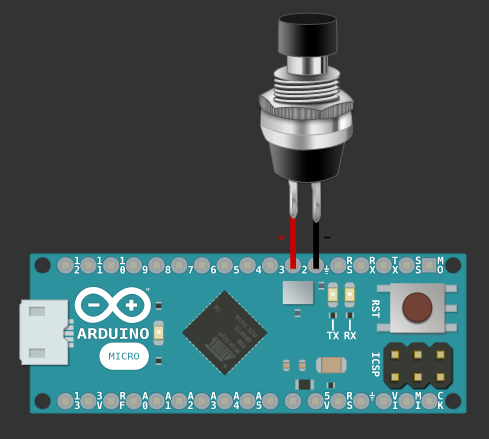
<style>
.page{position:relative;width:489px;height:439px;background:#333333}
.page>*{position:absolute;margin:0}
.t1{font:12px "Menlo-Bold";color:#cc0000}
.t2{font:12px "Menlo-Bold";color:#000000}
.t3{font:10.3px "Menlo-Bold";color:#ffffff}
.t4{font:2.9px "Menlo-Bold"}
.t5{font:5.9px "Menlo-Regular";color:#555852}
.t6{font:10.4px "Menlo-Bold";color:#ffffff}
.t7{font:14.6px "Menlo-Bold";color:#ffffff;scale:1.18 1}
.t8{font:9.2px "Menlo-Regular";color:#2c8e98;scale:1.12 1}
</style>
<div class="page">
<p class="t1" style="left:278px;top:234px;width:7px;height:7px">+</p>
<p class="t2" style="left:324px;top:236px;width:7px;height:3px">-</p>
<p class="t3" style="left:74px;top:256px;width:6px;height:9px">1</p>
<p class="t3" style="left:97px;top:256px;width:6px;height:9px">1</p>
<p class="t3" style="left:120px;top:256px;width:5px;height:9px">1</p>
<p class="t3" style="left:347px;top:256px;width:6px;height:9px">R</p>
<p class="t3" style="left:369px;top:256px;width:7px;height:9px">R</p>
<p class="t3" style="left:392px;top:256px;width:6px;height:9px">T</p>
<p class="t3" style="left:415px;top:256px;width:6px;height:9px">S</p>
<p class="t3" style="left:437px;top:256px;width:7px;height:9px">M</p>
<p class="t3" style="left:74px;top:265px;width:6px;height:9px">2</p>
<p class="t3" style="left:97px;top:266px;width:6px;height:8px">1</p>
<p class="t3" style="left:120px;top:266px;width:5px;height:8px">0</p>
<p class="t3" style="left:142px;top:265px;width:6px;height:9px">9</p>
<p class="t3" style="left:165px;top:265px;width:6px;height:9px">8</p>
<p class="t3" style="left:188px;top:266px;width:5px;height:8px">7</p>
<p class="t3" style="left:211px;top:265px;width:5px;height:9px">6</p>
<p class="t3" style="left:234px;top:266px;width:5px;height:8px">5</p>
<p class="t3" style="left:256px;top:266px;width:6px;height:8px">4</p>
<p class="t3" style="left:279px;top:265px;width:6px;height:9px">3</p>
<p class="t3" style="left:302px;top:265px;width:5px;height:9px">2</p>
<p class="t3" style="left:347px;top:265px;width:6px;height:9px">S</p>
<p class="t3" style="left:369px;top:266px;width:7px;height:8px">X</p>
<p class="t3" style="left:392px;top:266px;width:7px;height:8px">X</p>
<p class="t3" style="left:415px;top:265px;width:6px;height:9px">S</p>
<p class="t3" style="left:437px;top:265px;width:6px;height:9px">O</p>
<p class="t4" style="left:145px;top:288px;width:5px;height:3px">TM</p>
<p class="t5" style="left:213px;top:304px;width:39px;height:39px;rotate:-135deg">ROBOTS      TM</p>
<p class="t6" style="left:372px;top:300px;width:8px;height:18px;rotate:90deg">RST</p>
<p class="t5" style="left:235px;top:314px;width:23px;height:24px;rotate:-135deg">BIG DATA</p>
<p class="t7" style="left:77px;top:328px;width:72px;height:11px">ARDUINO</p>
<p class="t5" style="left:218px;top:332px;width:23px;height:22px;rotate:-135deg">MEGA32U4</p>
<p class="t5" style="left:236px;top:339px;width:11px;height:10px;rotate:-135deg">RBD</p>
<p class="t3" style="left:327px;top:331px;width:12px;height:9px">TX</p>
<p class="t3" style="left:344px;top:331px;width:13px;height:9px">RX</p>
<p class="t8" style="left:109px;top:352px;width:30px;height:8px">MICRO</p>
<p class="t6" style="left:372px;top:352px;width:8px;height:25px;rotate:90deg">ICSP</p>
<p class="t3" style="left:74px;top:401px;width:6px;height:8px">3</p>
<p class="t3" style="left:74px;top:392px;width:6px;height:8px">1</p>
<p class="t3" style="left:96px;top:401px;width:7px;height:8px">V</p>
<p class="t3" style="left:97px;top:391px;width:5px;height:9px">3</p>
<p class="t3" style="left:120px;top:401px;width:5px;height:8px">F</p>
<p class="t3" style="left:120px;top:392px;width:6px;height:8px">R</p>
<p class="t3" style="left:142px;top:401px;width:6px;height:9px">0</p>
<p class="t3" style="left:142px;top:392px;width:7px;height:8px">A</p>
<p class="t3" style="left:165px;top:401px;width:6px;height:8px">1</p>
<p class="t3" style="left:165px;top:392px;width:7px;height:8px">A</p>
<p class="t3" style="left:187px;top:392px;width:7px;height:8px">A</p>
<p class="t3" style="left:188px;top:401px;width:5px;height:8px">2</p>
<p class="t3" style="left:210px;top:392px;width:7px;height:8px">A</p>
<p class="t3" style="left:211px;top:401px;width:5px;height:8px">3</p>
<p class="t3" style="left:233px;top:401px;width:6px;height:8px">4</p>
<p class="t3" style="left:233px;top:392px;width:7px;height:8px">A</p>
<p class="t3" style="left:255px;top:392px;width:7px;height:8px">A</p>
<p class="t3" style="left:256px;top:401px;width:6px;height:8px">5</p>
<p class="t3" style="left:324px;top:401px;width:6px;height:8px">V</p>
<p class="t3" style="left:324px;top:392px;width:6px;height:8px">5</p>
<p class="t3" style="left:347px;top:401px;width:6px;height:8px">S</p>
<p class="t3" style="left:347px;top:392px;width:6px;height:8px">R</p>
<p class="t3" style="left:392px;top:392px;width:6px;height:8px">V</p>
<p class="t3" style="left:393px;top:401px;width:5px;height:8px">I</p>
<p class="t3" style="left:415px;top:401px;width:6px;height:8px">I</p>
<p class="t3" style="left:415px;top:392px;width:6px;height:8px">M</p>
<p class="t3" style="left:438px;top:401px;width:6px;height:8px">K</p>
<p class="t3" style="left:438px;top:391px;width:5px;height:9px">C</p>
</div>
